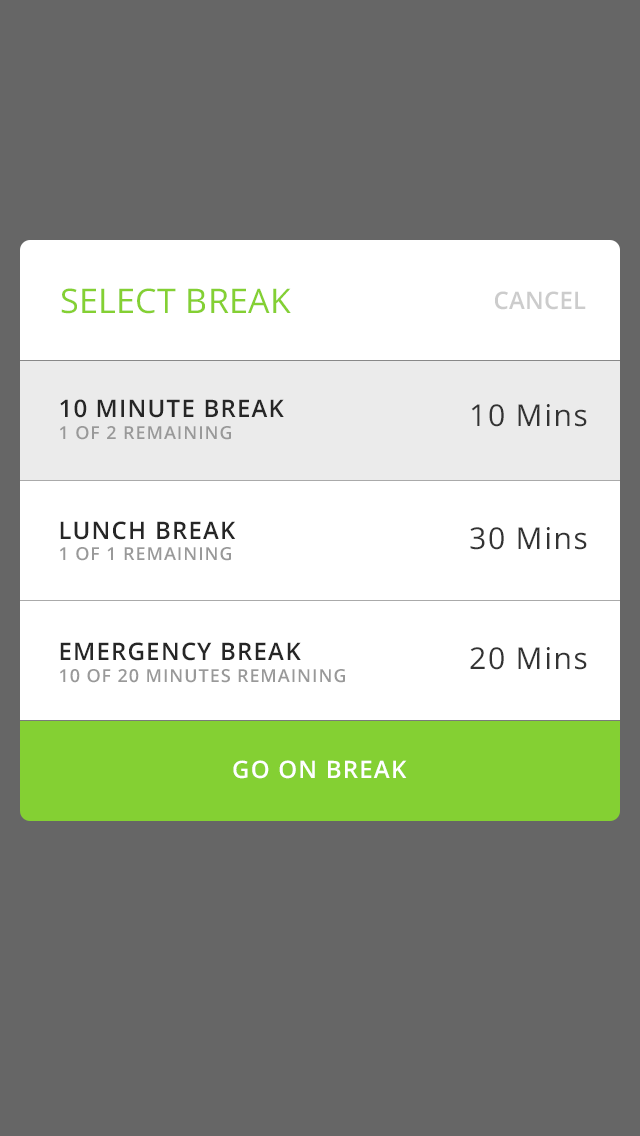
<style>
.page{position:relative;width:640px;height:1136px;background:#666666}
.page>*{position:absolute;margin:0}
.t1{font:34px "OpenSans";letter-spacing:0.01em;color:#84d033;text-transform:uppercase}
.t2{font:24px "OpenSans-Semibold";letter-spacing:0.01em;color:#cccccc}
.t3{font:18px "OpenSans-Semibold";letter-spacing:0.05em;color:#999999;text-transform:uppercase}
.t4{font:24px/120px "OpenSans-Semibold";letter-spacing:0.05em;color:#262626;text-transform:uppercase}
.t5{font:24px/100px "OpenSans-Semibold";letter-spacing:0.05em;color:#262626;text-transform:uppercase}
.t6{font:30px "OpenSans";letter-spacing:0.05em;color:#333333}
.t7{font:24px "OpenSans-Semibold";letter-spacing:0.05em;color:#ffffff;text-transform:uppercase}
</style>
<div class="page">
<p class="t1" style="left:61px;top:288px;width:230px;height:26px">Select Break</p>
<p class="t2" style="left:495px;top:291px;width:91px;height:19px">CANCEL</p>
<p class="t3" style="left:60px;top:399px;width:285px;height:284px"><span class="t4">10 minute break <br></span>1 of 2 Remaining<br><span class="t5">Lunch break <br></span>1 of 1 Remaining<br><span class="t5">EMERGENCY BREAK<br></span>10 of 20 minutes Remaining</p>
<p class="t6" style="left:471px;top:404px;width:116px;height:23px">10 Mins</p>
<p class="t6" style="left:470px;top:527px;width:117px;height:23px">30 Mins</p>
<p class="t6" style="left:470px;top:647px;width:117px;height:23px">20 Mins</p>
<p class="t7" style="left:233px;top:760px;width:174px;height:19px">GO ON BREAK</p>
</div>
